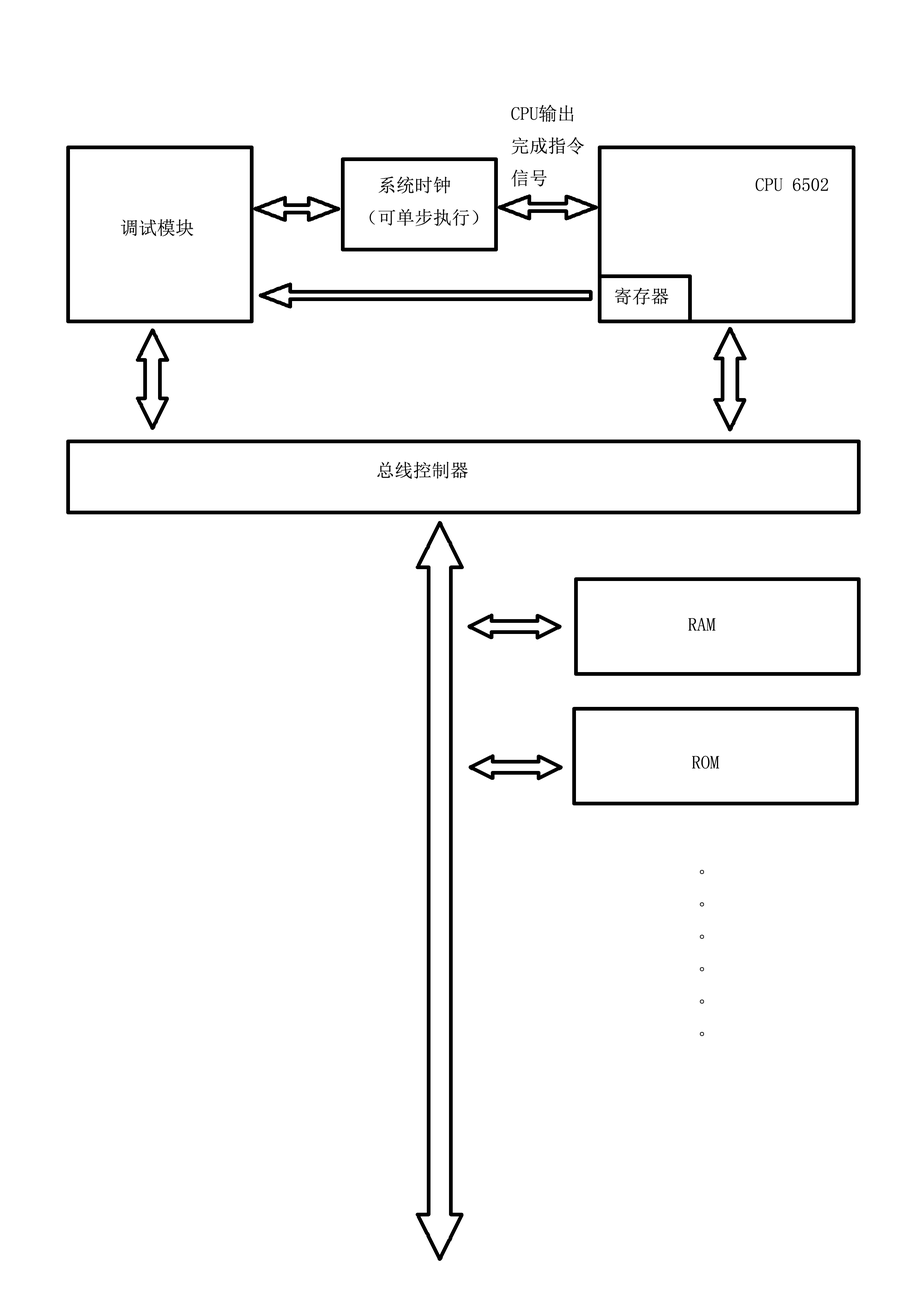
<style>
.page{position:relative;width:918px;height:1299px;background:#ffffff}
.page>*{position:absolute;margin:0}
.t1{font:18.5px "SimSun";color:#000000}
</style>
<div class="page">
<p class="t1" style="left:511px;top:104px;width:73px;height:83px">CPU输出<br>完成指令<br>信号</p>
<p class="t1" style="left:369px;top:176px;width:109px;height:50px">系统时钟<br>（可单步执行）</p>
<p class="t1" style="left:756px;top:178px;width:72px;height:13px">CPU 6502</p>
<p class="t1" style="left:121px;top:219px;width:73px;height:17px">调试模块</p>
<p class="t1" style="left:615px;top:287px;width:54px;height:18px">寄存器</p>
<p class="t1" style="left:377px;top:461px;width:91px;height:18px">总线控制器</p>
<p class="t1" style="left:688px;top:618px;width:28px;height:12px">RAM</p>
<p class="t1" style="left:692px;top:756px;width:27px;height:13px">ROM</p>
<p class="t1" style="left:700px;top:870px;width:4px;height:166px">。<br>。<br>。<br>。<br>。<br>。</p>
</div>
